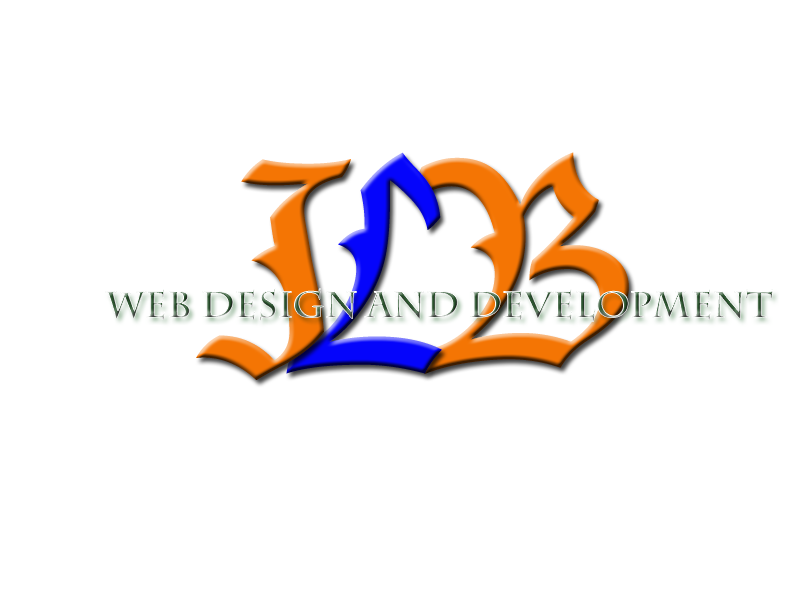
<style>
.page{position:relative;width:800px;height:600px;background:#ffffff}
.page>*{position:absolute;margin:0}
.t1{font:245.7px "LucidaBlackletter";color:#f47504;scale:1.34 1}
.t2{font:290.4px "LucidaBlackletter";color:#0505fb;scale:0.85 1}
.t3{font:282.5px "LucidaBlackletter";color:#f47504;scale:1.03 1}
.t4{font:36px "CharlemagneStd-Bold"}
</style>
<div class="page">
<p class="t1" style="left:196px;top:159px;width:155px;height:221px">J</p>
<p class="t2" style="left:286px;top:152px;width:156px;height:222px">L</p>
<p class="t3" style="left:413px;top:152px;width:216px;height:222px;rotate:-3deg">B</p>
<p class="t4" style="left:105px;top:288px;width:668px;height:34px">Web Design and Development</p>
</div>
